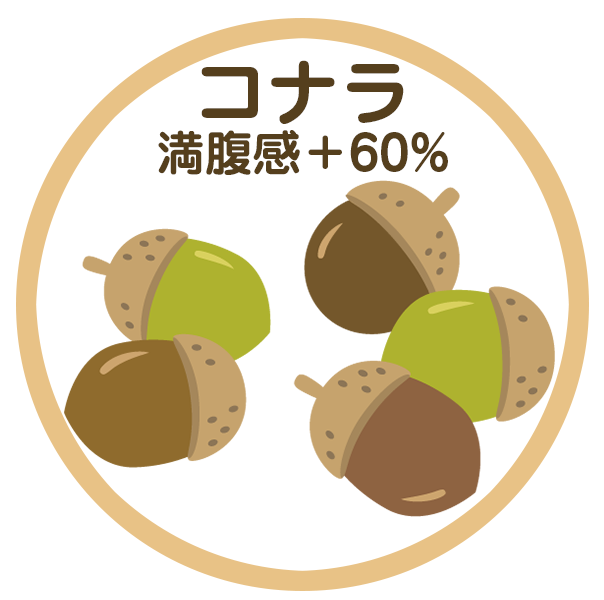
<style>
.page{position:relative;width:604px;height:600px;background:#ffffff}
.page>*{position:absolute;margin:0}
.t1{font:48px/72px "Jun501Pro-Bold";color:#553f1d}
.t2{font:72px/72px "Jun501Pro-Bold";color:#553f1d}
</style>
<div class="page">
<p class="t1" style="left:158px;top:60px;width:290px;height:115px;text-align:center"><span class="t2">コナラ<br></span>満腹感＋60%</p>
</div>
